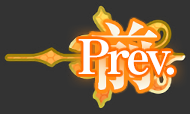
<style>
.page{position:relative;width:190px;height:114px;background:#333333}
.page>*{position:absolute;margin:0}
.t1{font:48px "RyuminPro-ExBold";letter-spacing:-0.08em;color:#ffffff}
</style>
<div class="page">
<p class="t1" style="left:78px;top:39px;width:96px;height:36px">Prev.</p>
</div>
